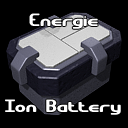
<style>
.page{position:relative;width:128px;height:128px;background:#000000}
.page>*{position:absolute;margin:0}
.t1{font:18px "GravitateBRK";color:#ffffff}
</style>
<div class="page">
<p class="t1" style="left:29px;top:13px;width:69px;height:16px">Energie</p>
<p class="t1" style="left:5px;top:99px;width:116px;height:16px">Ion Battery</p>
</div>
